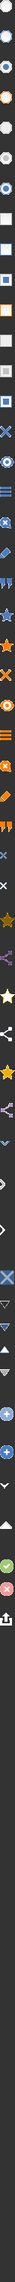
<style>
.page{position:relative;width:15px;height:2282px;background:#333333}
.page>*{position:absolute;margin:0}
.t1{font:9px "MicrosoftYaHei";color:#ffffff;font-weight:bold;scale:1.23 1}
</style>
<div class="page">
<p class="t1" style="left:4px;top:1587px;width:6px;height:5px">x</p>
</div>
